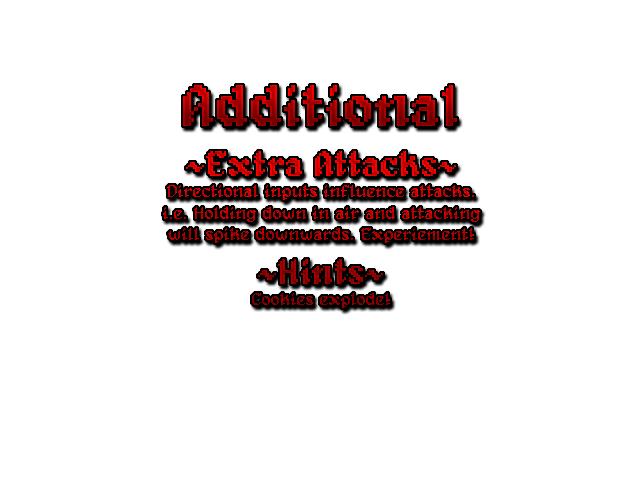
<style>
.page{position:relative;width:640px;height:480px;background:#ffffff}
.page>*{position:absolute;margin:0}
.t1{font:60px "Alagard"}
.t2{font:18px "Alagard"}
.t3{font:36px "Alagard"}
</style>
<div class="page">
<p class="t1" style="left:183px;top:85px;width:274px;height:41px">Additional</p>
<p class="t2" style="left:163px;top:151px;width:317px;height:157px;text-align:center"><span class="t3">~Extra Attacks~<br></span>Directional inputs influence attacks.<br>i.e. Holding down in air and attacking<br>will spike downwards. Experiement!<br><span class="t3">~Hints~<br></span>Cookies explode!</p>
</div>
